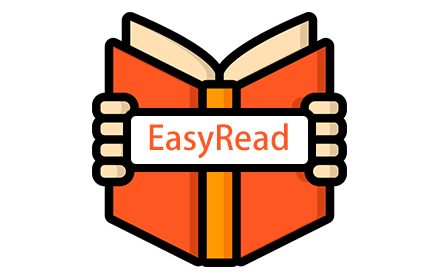
<style>
.page{position:relative;width:440px;height:280px;background:#ffffff}
.page>*{position:absolute;margin:0}
.t1{font:33.3px "AdobeHeitiStd-Regular";color:#ff5722}
</style>
<div class="page">
<p class="t1" style="left:149px;top:123px;width:139px;height:36px">EasyRead</p>
</div>
